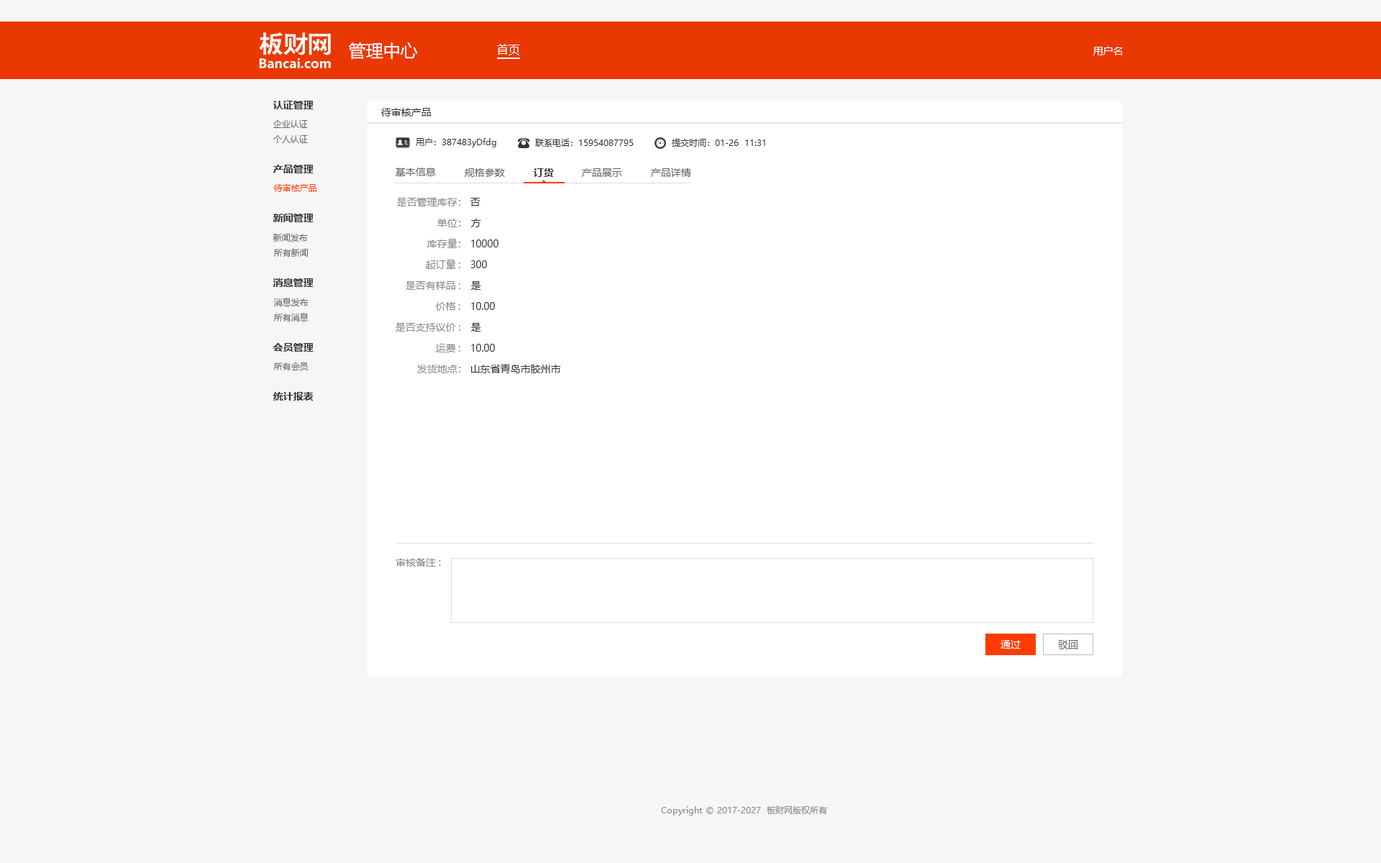
<style>
.page{position:relative;width:1381px;height:863px;background:#f6f6f6}
.page>*{position:absolute;margin:0}
.t1{font:17.3px "MicrosoftYaHei";color:#ffffff}
.t2{font:11.5px "MicrosoftYaHei";color:#ffffff}
.t3{font:10.1px "MicrosoftYaHei";color:#ffffff}
.t4{font:10.1px "MicrosoftYaHei-Bold";color:#333333}
.t5{font:10.1px "MicrosoftYaHei";color:#333333}
.t6{font:8.6px "MicrosoftYaHei";color:#666666}
.t7{font:8.6px "MicrosoftYaHei";color:#333333}
.t8{font:10.1px "MicrosoftYaHei";color:#666666}
.t9{font:8.6px "MicrosoftYaHei";color:#ff3c00}
.t10{font:10.1px "MicrosoftYaHei";color:#888888}
.t11{font:8.6px "MicrosoftYaHei";color:#888888}
</style>
<div class="page">
<p class="t1" style="left:349px;top:42px;width:69px;height:18px">管理中心</p>
<p class="t2" style="left:497px;top:44px;width:23px;height:11px">首页</p>
<p class="t3" style="left:1094px;top:46px;width:29px;height:9px">用户名</p>
<p class="t4" style="left:273px;top:101px;width:41px;height:8px">认证管理</p>
<p class="t5" style="left:381px;top:108px;width:50px;height:9px">待审核产品</p>
<p class="t6" style="left:273px;top:120px;width:35px;height:8px">企业认证</p>
<p class="t6" style="left:273px;top:135px;width:35px;height:8px">个人认证</p>
<p class="t7" style="left:416px;top:138px;width:80px;height:9px">用户：387483yDfdg</p>
<p class="t7" style="left:535px;top:139px;width:99px;height:8px">联系电话：15954087795</p>
<p class="t7" style="left:672px;top:139px;width:93px;height:8px">提交时间：01-26  11:31</p>
<p class="t4" style="left:273px;top:165px;width:41px;height:8px">产品管理</p>
<p class="t8" style="left:396px;top:168px;width:40px;height:8px">基本信息</p>
<p class="t8" style="left:465px;top:168px;width:40px;height:9px">规格参数</p>
<p class="t4" style="left:534px;top:168px;width:20px;height:9px">订货</p>
<p class="t8" style="left:582px;top:168px;width:40px;height:9px">产品展示</p>
<p class="t8" style="left:651px;top:168px;width:40px;height:9px">产品详情</p>
<p class="t9" style="left:274px;top:184px;width:43px;height:8px">待审核产品</p>
<p class="t10" style="left:397px;top:198px;width:63px;height:8px">是否管理库存：</p>
<p class="t5" style="left:470px;top:198px;width:11px;height:8px">否</p>
<p class="t4" style="left:273px;top:214px;width:41px;height:8px">新闻管理</p>
<p class="t10" style="left:437px;top:219px;width:23px;height:8px">单位：</p>
<p class="t5" style="left:471px;top:219px;width:10px;height:8px">方</p>
<p class="t6" style="left:273px;top:233px;width:35px;height:9px">新闻发布</p>
<p class="t10" style="left:427px;top:239px;width:33px;height:9px">库存量：</p>
<p class="t5" style="left:471px;top:240px;width:28px;height:7px">10000</p>
<p class="t6" style="left:274px;top:248px;width:34px;height:9px">所有新闻</p>
<p class="t10" style="left:426px;top:260px;width:34px;height:9px">起订量:</p>
<p class="t5" style="left:470px;top:260px;width:17px;height:8px">300</p>
<p class="t4" style="left:273px;top:278px;width:41px;height:9px">消息管理</p>
<p class="t10" style="left:406px;top:281px;width:54px;height:9px">是否有样品:</p>
<p class="t5" style="left:471px;top:281px;width:10px;height:9px">是</p>
<p class="t6" style="left:274px;top:298px;width:35px;height:8px">消息发布</p>
<p class="t10" style="left:436px;top:302px;width:24px;height:9px">价格:</p>
<p class="t5" style="left:471px;top:302px;width:24px;height:8px">10.00</p>
<p class="t6" style="left:274px;top:313px;width:35px;height:9px">所有消息</p>
<p class="t10" style="left:396px;top:323px;width:64px;height:9px">是否支持议价:</p>
<p class="t5" style="left:471px;top:323px;width:10px;height:9px">是</p>
<p class="t4" style="left:273px;top:343px;width:41px;height:9px">会员管理</p>
<p class="t10" style="left:436px;top:344px;width:24px;height:9px">运费:</p>
<p class="t5" style="left:471px;top:344px;width:24px;height:8px">10.00</p>
<p class="t6" style="left:274px;top:363px;width:35px;height:7px">所有会员</p>
<p class="t10" style="left:417px;top:365px;width:43px;height:8px">发货地点：</p>
<p class="t5" style="left:471px;top:364px;width:90px;height:9px">山东省青岛市胶州市</p>
<p class="t4" style="left:273px;top:392px;width:41px;height:9px">统计报表</p>
<p class="t10" style="left:396px;top:558px;width:45px;height:9px">审核备注:</p>
<p class="t3" style="left:1001px;top:640px;width:20px;height:9px">通过</p>
<p class="t8" style="left:1058px;top:640px;width:20px;height:10px">驳回</p>
<p class="t11" style="left:661px;top:806px;width:166px;height:10px">Copyright © 2017-2027  板财网版权所有</p>
</div>
